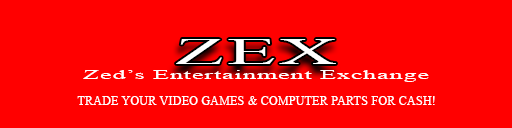
<style>
.page{position:relative;width:512px;height:128px;background:#ff0000}
.page>*{position:absolute;margin:0}
.t1{font:37px "TimesNewRomanPSMT";letter-spacing:0.04em;color:#ffffff;scale:2.15 1}
.t2{font:12px "TimesNewRomanPSMT";letter-spacing:0.04em;color:#ffffff;scale:2.15 1}
.t3{font:12px "TimesNewRomanPSMT";letter-spacing:0.04em;color:#ffffff;scale:0.97 1}
</style>
<div class="page">
<p class="t1" style="left:176px;top:39px;width:160px;height:25px">ZEX</p>
<p class="t2" style="left:83px;top:70px;width:346px;height:12px">Zed’s Entertainment Exchange</p>
<p class="t3" style="left:77px;top:96px;width:358px;height:9px">TRADE YOUR VIDEO GAMES &amp; COMPUTER PARTS FOR CASH!</p>
</div>
